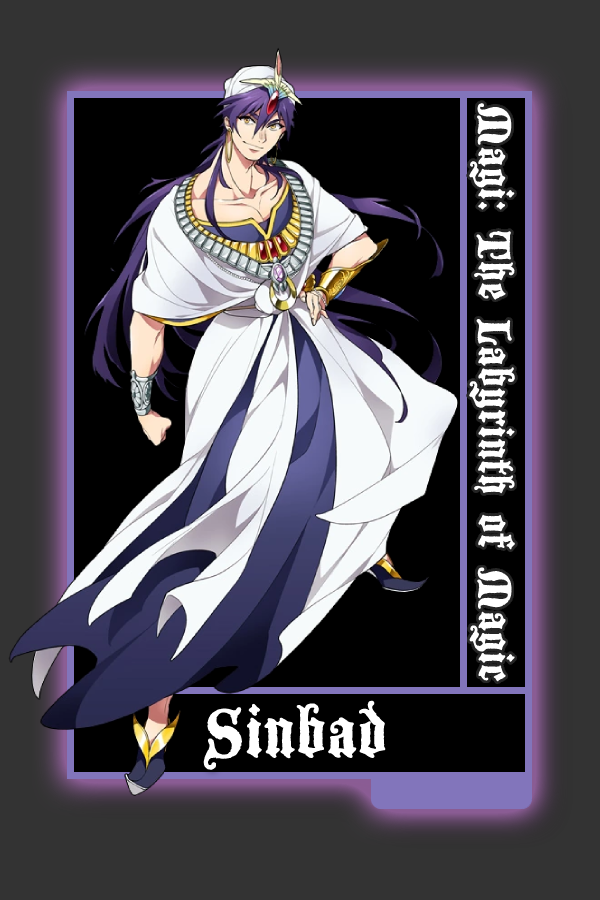
<style>
.page{position:relative;width:600px;height:900px;background:#000000}
.page>*{position:absolute;margin:0}
.t1{font:50px "BlackwoodCastle";color:#ffffff}
.t2{font:75px "BlackwoodCastle";color:#ffffff}
</style>
<div class="page">
<p class="t1" style="left:469px;top:103px;width:46px;height:579px;rotate:90deg">Magi: The Labyrinth of Magic</p>
<p class="t2" style="left:203px;top:700px;width:183px;height:70px">Sinbad</p>
</div>
